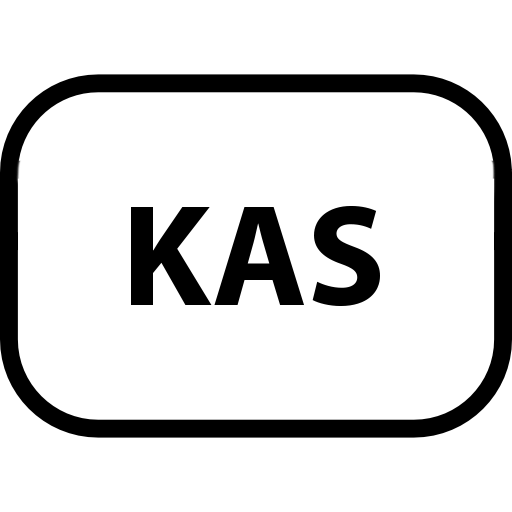
<style>
.page{position:relative;width:512px;height:512px;background:#ffffff}
.page>*{position:absolute;margin:0}
.t1{font:145.6px "MyriadPro-Bold";color:#000000}
</style>
<div class="page">
<p class="t1" style="left:131px;top:206px;width:249px;height:101px">KAS</p>
</div>
